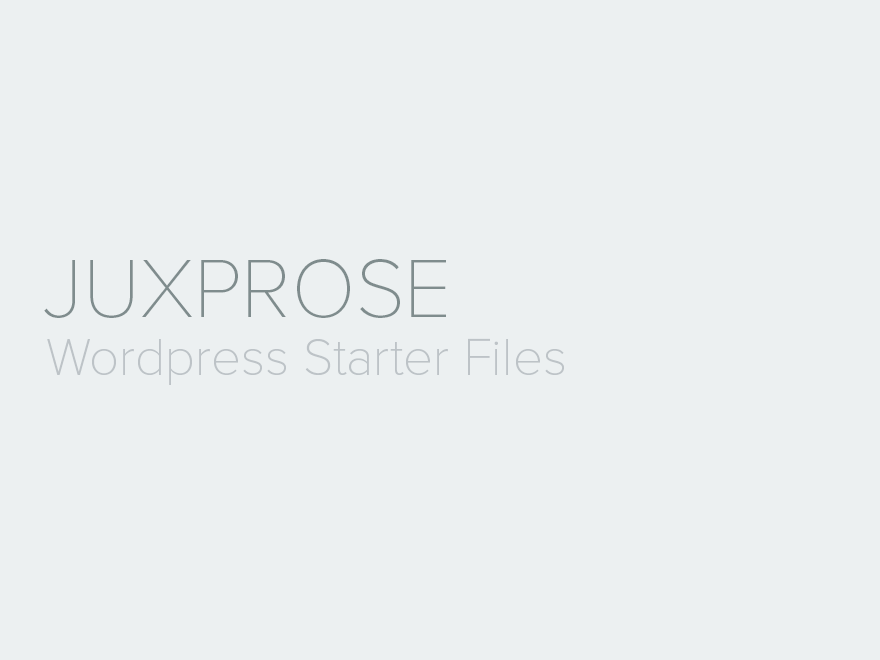
<style>
.page{position:relative;width:880px;height:660px;background:#ecf0f1}
.page>*{position:absolute;margin:0}
.t1{font:85px "ProximaNovaT-Thin";color:#7f8c8d}
.t2{font:53px "ProximaNovaT-Thin";color:#bdc3c7}
</style>
<div class="page">
<p class="t1" style="left:44px;top:259px;width:402px;height:59px">JUXPROSE</p>
<p class="t2" style="left:47px;top:338px;width:517px;height:47px">Wordpress Starter Files</p>
</div>
